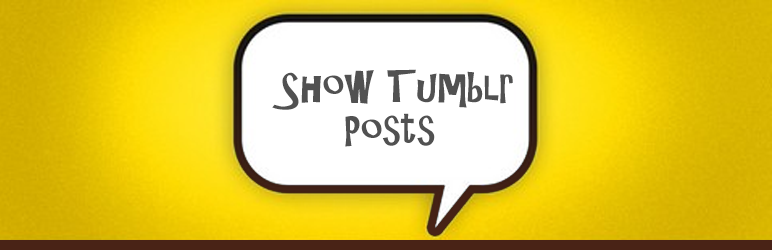
<style>
.page{position:relative;width:772px;height:250px}
.page>*{position:absolute;margin:0}
.t1{font:40.4px "ARCHRISTY";color:#515151}
.t2{font:40.4px "ARCHRISTY";color:#256dda}
</style>
<div class="page">
<p class="t1" style="left:272px;top:69px;width:241px;height:41px">Show Tumblr <span class="t2">Posts</span></p>
<p class="t1" style="left:345px;top:113px;width:90px;height:34px">Posts</p>
</div>
